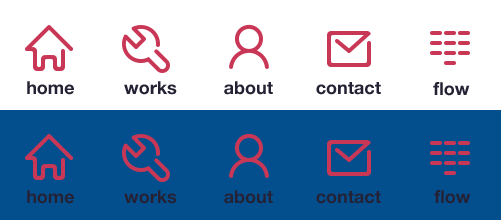
<style>
.page{position:relative;width:501px;height:220px;background:#034f8d}
.page>*{position:absolute;margin:0}
.t1{font:18px "HelveticaNeue-Bold";color:#232133}
</style>
<div class="page">
<p class="t1" style="left:27px;top:81px;width:47px;height:14px">home</p>
<p class="t1" style="left:124px;top:81px;width:53px;height:14px">works</p>
<p class="t1" style="left:224px;top:81px;width:49px;height:14px">about</p>
<p class="t1" style="left:316px;top:82px;width:65px;height:13px">contact</p>
<p class="t1" style="left:433px;top:82px;width:37px;height:14px">flow</p>
<p class="t1" style="left:27px;top:190px;width:47px;height:14px">home</p>
<p class="t1" style="left:124px;top:190px;width:53px;height:14px">works</p>
<p class="t1" style="left:224px;top:190px;width:49px;height:14px">about</p>
<p class="t1" style="left:316px;top:191px;width:65px;height:13px">contact</p>
<p class="t1" style="left:434px;top:190px;width:37px;height:14px">flow</p>
</div>
